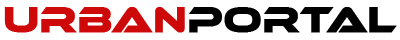
<style>
.page{position:relative;width:400px;height:40px;background:#ffffff}
.page>*{position:absolute;margin:0}
.t1{font:36px "EthnocentricRg-Regular";color:#000000;font-weight:bold}
.t2{font:36px "EthnocentricRg-Regular";color:#cd0909;font-weight:bold}
</style>
<div class="page">
<p class="t1" style="left:4px;top:7px;width:393px;height:26px"><span class="t2">urban</span>Portal</p>
</div>
